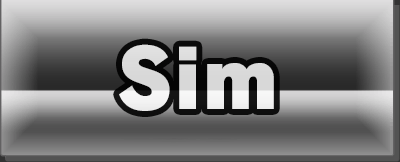
<style>
.page{position:relative;width:400px;height:162px}
.page>*{position:absolute;margin:0}
.t1{font:80px "RodinPro-UB";color:#dcdcdc}
</style>
<div class="page">
<p class="t1" style="left:119px;top:44px;width:155px;height:67px">Sim</p>
</div>
